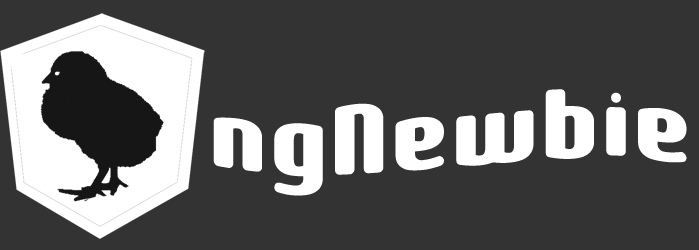
<style>
.page{position:relative;width:699px;height:250px;background:#333333}
.page>*{position:absolute;margin:0}
.t1{font:125px "GalapogosBRK";letter-spacing:0.05em;color:#ffffff}
</style>
<div class="page">
<p class="t1" style="left:213px;top:89px;width:474px;height:107px">ngNewbie</p>
</div>
